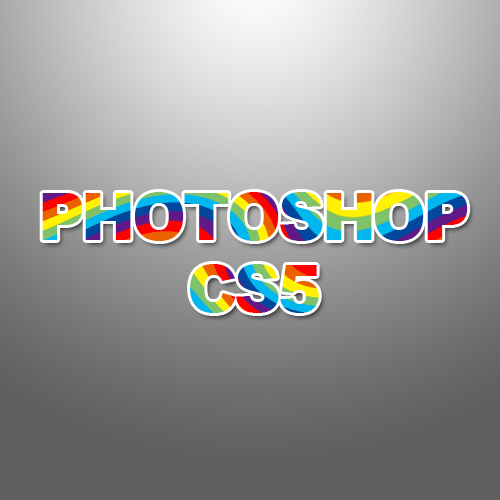
<style>
.page{position:relative;width:500px;height:500px}
.page>*{position:absolute;margin:0}
.t1{font:65px/72px "Arial-Black";letter-spacing:-0.05em;text-transform:uppercase}
</style>
<div class="page">
<p class="t1" style="left:42px;top:192px;width:426px;height:121px;text-align:center">photoshop<br>cs5</p>
</div>
